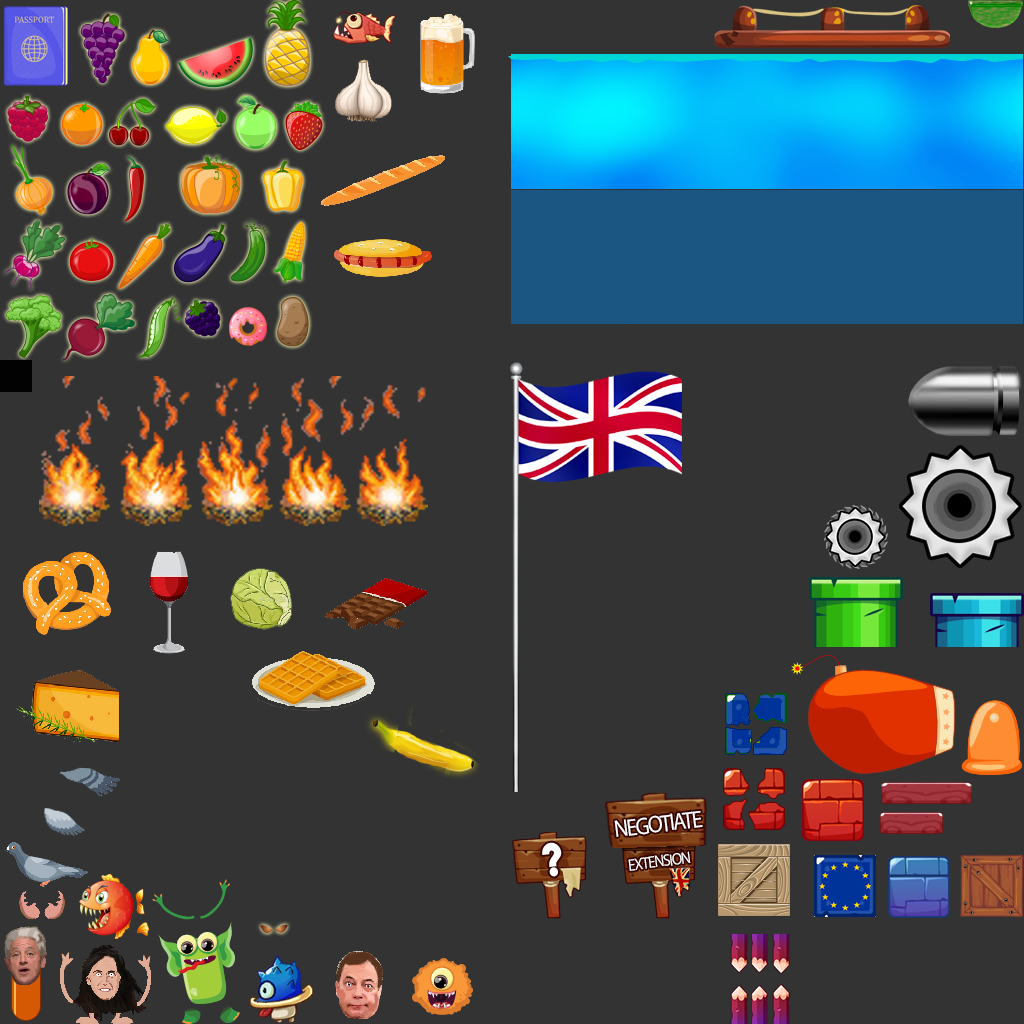
<style>
.page{position:relative;width:1024px;height:1024px;background:#333333}
.page>*{position:absolute;margin:0}
.t1{font:23.9px "MyriadPro-Regular";letter-spacing:-0.079em;color:#ffffff;scale:0.91 1}
.t2{font:39.1px "LemonMilkbold";letter-spacing:-0.079em;color:#ffffff;scale:0.91 1}
.t3{font:16.7px "MyriadPro-Regular";letter-spacing:-0.079em;color:#ffffff;scale:0.91 1}
</style>
<div class="page">
<p class="t1" style="left:614px;top:810px;width:89px;height:27px;rotate:-7deg">NEGOTIATE</p>
<p class="t2" style="left:542px;top:842px;width:20px;height:35px;rotate:-7deg">?</p>
<p class="t3" style="left:628px;top:851px;width:63px;height:20px;rotate:-7deg">EXTENSION</p>
</div>
